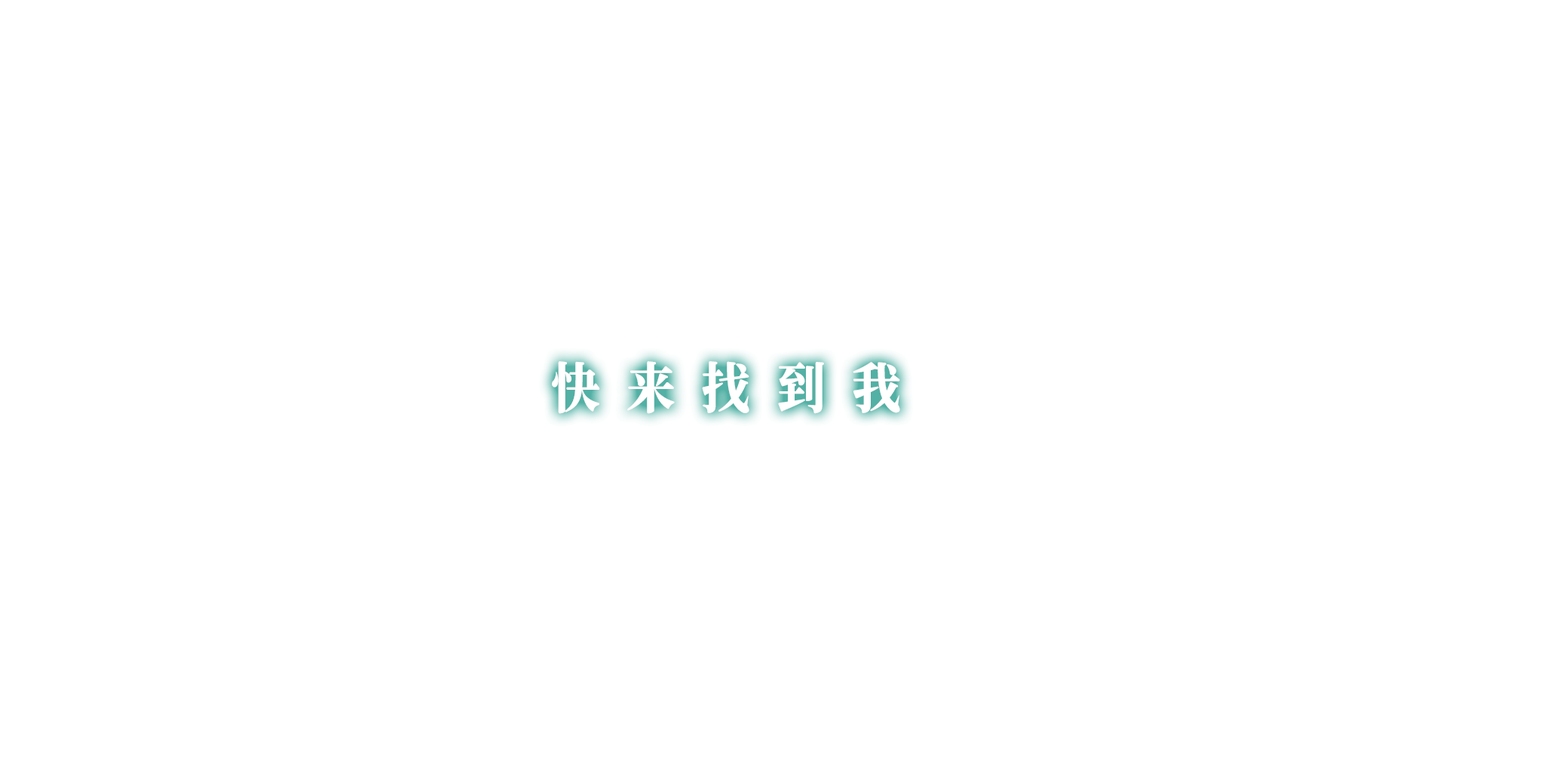
<style>
.page{position:relative;width:1544px;height:772px;background:#ffffff}
.page>*{position:absolute;margin:0}
.t1{font:54.3px "ChillJinshuSongHeavy";letter-spacing:0.14em;color:#ffffff;scale:0.9 1}
</style>
<div class="page">
<p class="t1" style="left:552px;top:361px;width:348px;height:53px">快 来 找 到 我</p>
</div>
